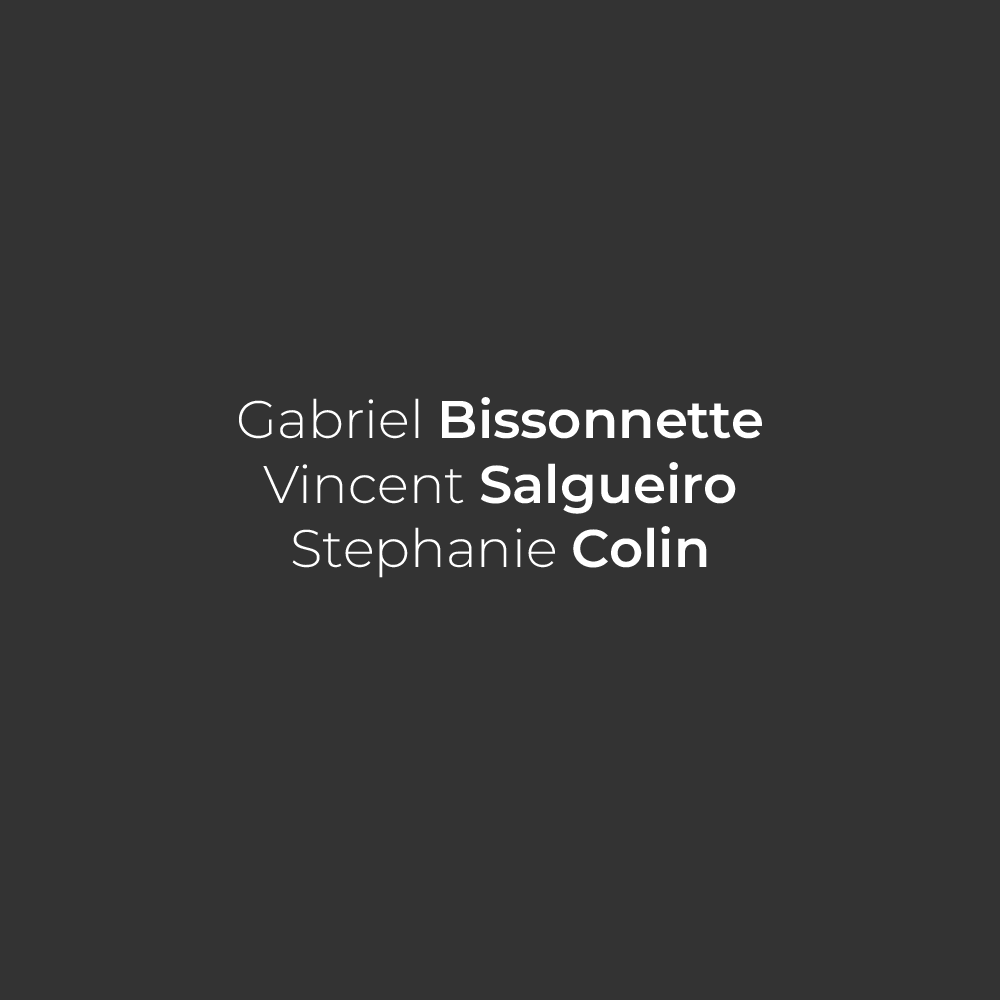
<style>
.page{position:relative;width:1000px;height:1000px;background:#333333}
.page>*{position:absolute;margin:0}
.t1{font:53px "Montserrat-SemiBold";color:#ffffff}
.t2{font:53px "Montserrat-Light";color:#ffffff}
</style>
<div class="page">
<p class="t1" style="left:239px;top:397px;width:523px;height:181px;text-align:center"><span class="t2">Gabriel </span>Bissonnette<br><span class="t2">Vincent </span>Salgueiro<br><span class="t2">Stephanie </span>Colin</p>
</div>
